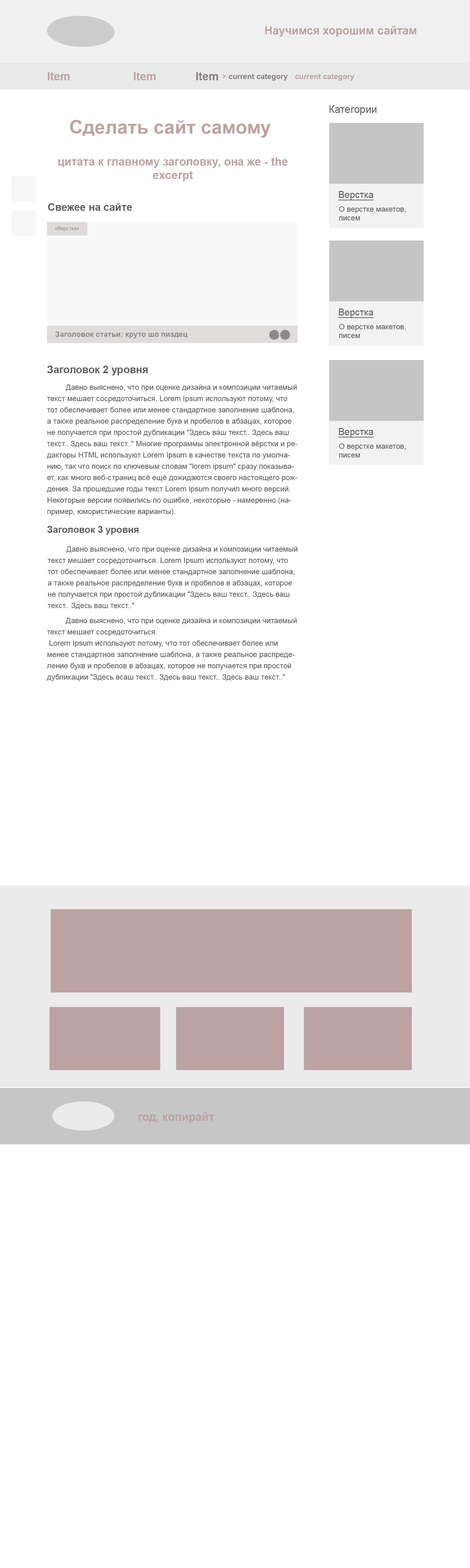
<style>
.page{position:relative;width:470px;height:1568px;background:#ffffff}
.page>*{position:absolute;margin:0}
.t1{font:11.3px "Arial-BoldMT";color:#bca2a2}
.t2{font:11.3px "Arial-BoldMT";color:#888080}
.t3{font:7.5px "Arial-BoldMT";color:#888080}
.t4{font:7.5px "Arial-BoldMT";color:#bca2a2}
.t5{font:10.3px "ArialMT";color:#5d5d5d}
.t6{font:18.8px "Arial-BoldMT";color:#bca2a2}
.t7{font:9.4px "ArialMT";color:#5d5d5d;text-decoration:underline}
.t8{font:10.3px "Arial-BoldMT";color:#5d5d5d}
.t9{font:7.5px "ArialMT";color:#5d5d5d}
.t10{font:5px "ArialMT";color:#8c8a8a}
.t11{font:7.5px "Arial-BoldMT";color:#8c8a8a}
.t12{font:7.5px/11.3px "ArialMT";color:#5d5d5d}
.t13{font:9.4px "Arial-BoldMT";color:#5d5d5d}
</style>
<div class="page">
<p class="t1" style="left:265px;top:26px;width:152px;height:11px">Научимся хорошим сайтам</p>
<p class="t1" style="left:48px;top:72px;width:22px;height:8px">Item</p>
<p class="t1" style="left:134px;top:72px;width:22px;height:8px">Item</p>
<p class="t2" style="left:196px;top:72px;width:22px;height:8px">Item</p>
<p class="t3" style="left:222px;top:74px;width:66px;height:7px"><span class="t4">&gt; </span>current category</p>
<p class="t4" style="left:295px;top:74px;width:60px;height:7px">current category</p>
<p class="t5" style="left:330px;top:105px;width:47px;height:10px">Категории</p>
<p class="t6" style="left:70px;top:120px;width:201px;height:18px">Сделать сайт самому</p>
<p class="t1" style="left:58px;top:157px;width:230px;height:24px;text-align:center">цитата к главному заголовку, она же - the excerpt</p>
<p class="t7" style="left:338px;top:191px;width:36px;height:9px">Верстка</p>
<p class="t8" style="left:48px;top:203px;width:84px;height:8px">Свежее на сайте</p>
<p class="t9" style="left:339px;top:206px;width:67px;height:14px">О верстке макетов, писем</p>
<p class="t10" style="left:55px;top:226px;width:24px;height:5px">«Верстка»</p>
<p class="t7" style="left:338px;top:309px;width:36px;height:9px">Верстка</p>
<p class="t9" style="left:339px;top:324px;width:67px;height:14px">О верстке макетов, писем</p>
<p class="t11" style="left:55px;top:331px;width:133px;height:7px">Заголовок статьи: круто шо пиздец</p>
<p class="t8" style="left:47px;top:366px;width:101px;height:9px">Заголовок 2 уровня</p>
<p class="t12" style="left:47px;top:384px;width:251px;height:132px">Давно выяснено, что при оценке дизайна и композиции читаемый текст мешает сосредоточиться. Lorem Ipsum используют потому, что тот обеспечивает более или менее стандартное заполнение шаблона, а также реальное распределение букв и пробелов в абзацах, которое не получается при простой дубликации "Здесь ваш текст.. Здесь ваш текст.. Здесь ваш текст.." Многие программы электронной вёрстки и редакторы HTML используют Lorem Ipsum в качестве текста по умолчанию, так что поиск по ключевым словам "lorem ipsum" сразу показывает, как много веб-страниц всё ещё дожидаются своего настоящего рождения. За прошедшие годы текст Lorem Ipsum получил много версий. Некоторые версии появились по ошибке, некоторые - намеренно (например, юмористические варианты).</p>
<p class="t7" style="left:338px;top:428px;width:36px;height:9px">Верстка</p>
<p class="t9" style="left:339px;top:443px;width:67px;height:15px">О верстке макетов, писем</p>
<p class="t13" style="left:47px;top:526px;width:92px;height:9px">Заголовок 3 уровня</p>
<p class="t12" style="left:48px;top:546px;width:250px;height:63px">Давно выяснено, что при оценке дизайна и композиции читаемый текст мешает сосредоточиться. Lorem Ipsum используют потому, что тот обеспечивает более или менее стандартное заполнение шаблона, а также реальное распределение букв и пробелов в абзацах, которое не получается при простой дубликации "Здесь ваш текст.. Здесь ваш текст.. Здесь ваш текст.."</p>
<p class="t12" style="left:47px;top:618px;width:250px;height:63px">Давно выяснено, что при оценке дизайна и композиции читаемый текст мешает сосредоточиться. <br> Lorem Ipsum используют потому, что тот обеспечивает более или менее стандартное заполнение шаблона, а также реальное распределение букв и пробелов в абзацах, которое не получается при простой дубликации "Здесь всаш текст.. Здесь ваш текст.. Здесь ваш текст.."</p>
<p class="t1" style="left:138px;top:1112px;width:77px;height:11px">год, копирайт</p>
</div>
